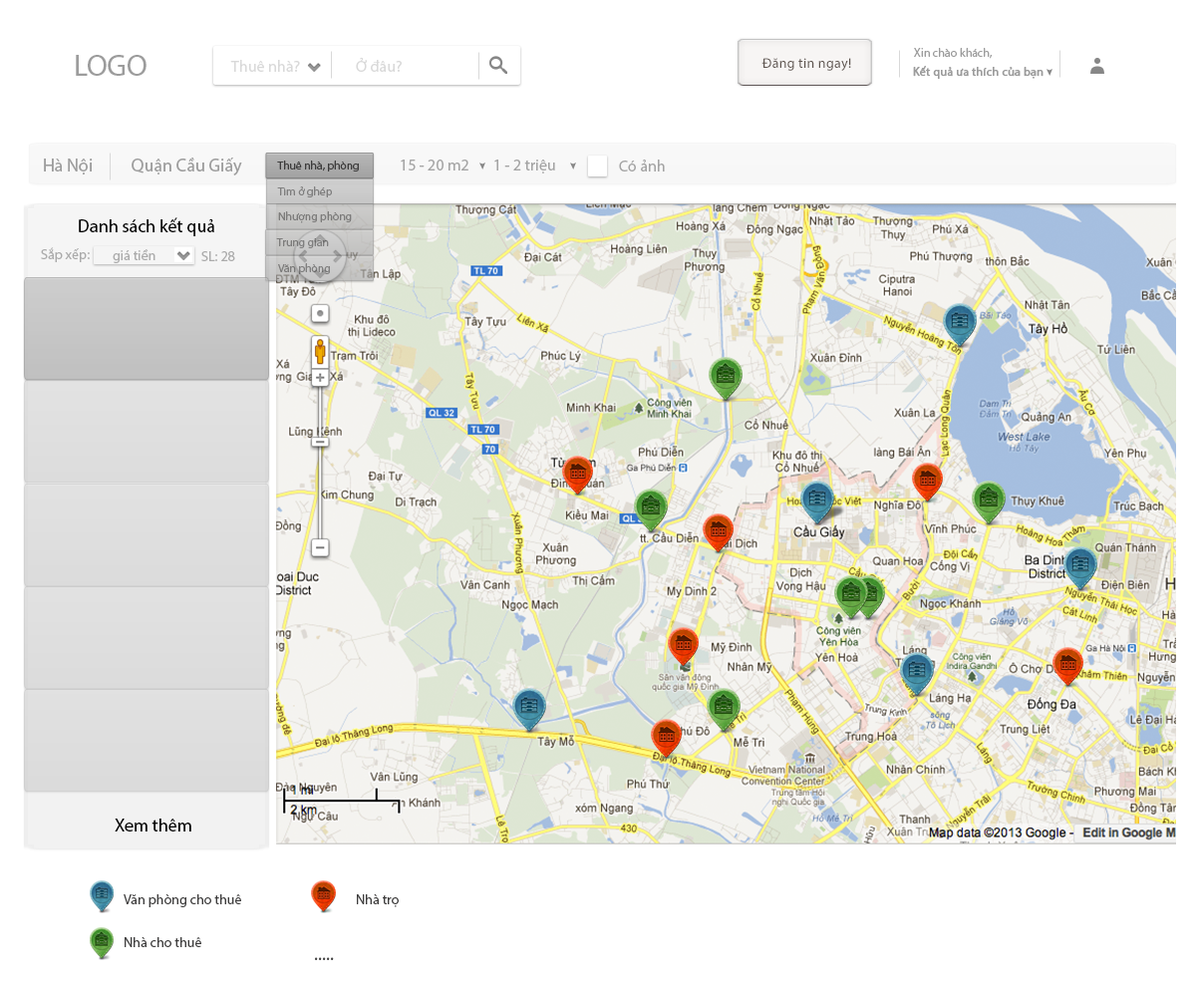
<style>
.page{position:relative;width:1196px;height:997px;background:#ffffff}
.page>*{position:absolute;margin:0}
.t1{font:12px "Tahoma";color:#9c9c9c}
.t2{font:29.9px "MyriadPro-Regular";color:#9c9c9c}
.t3{font:15.9px "MyriadPro-Regular";color:#c3c3c3}
.t4{font:14px "MyriadPro-Regular";letter-spacing:0.02em;color:#5d534d}
.t5{font:12px "MyriadPro-Regular";color:#9c9c9c;font-weight:bold}
.t6{font:17.9px "Tahoma";color:#9c9c9c}
.t7{font:11.5px "Tahoma";color:#3d3c3c}
.t8{font:15.9px "MyriadPro-Regular";color:#a4a4a4}
.t9{font:11.5px "Tahoma";color:#7f7f7f}
.t10{font:18.3px "MyriadPro-Regular";color:#030303}
.t11{font:11.5px "Tahoma";color:#7d7c7b}
.t12{font:11.5px "Tahoma";color:#7e7d7c}
.t13{font:14px "Tahoma";color:#ababab}
.t14{font:11.5px "Tahoma";color:#7e7e7e}
.t15{font:14px "Tahoma";color:#3d3c3c}
.t16{font:19.3px "Tahoma";color:#3d3c3c}
</style>
<div class="page">
<p class="t1" style="left:914px;top:48px;width:79px;height:11px">Xin chào khách,</p>
<p class="t2" style="left:76px;top:55px;width:71px;height:21px">LOGO</p>
<p class="t3" style="left:230px;top:60px;width:70px;height:12px;opacity:0.65">Thuê nhà?</p>
<p class="t3" style="left:356px;top:57px;width:46px;height:15px;opacity:0.65">Ở đâu?</p>
<p class="t4" style="left:762px;top:58px;width:89px;height:13px">Đăng tin ngay!</p>
<p class="t5" style="left:913px;top:66px;width:131px;height:14px">Kết quả ưa thích của bạn</p>
<p class="t6" style="left:44px;top:158px;width:49px;height:17px">Hà Nội</p>
<p class="t6" style="left:132px;top:158px;width:110px;height:17px">Quận Cầu Giấy</p>
<p class="t7" style="left:277px;top:160px;width:82px;height:11px">Thuê nhà, phòng</p>
<p class="t8" style="left:401px;top:159px;width:68px;height:11px">15 - 20 m2</p>
<p class="t8" style="left:494px;top:159px;width:61px;height:14px">1 - 2 triệu</p>
<p class="t8" style="left:619px;top:159px;width:46px;height:12px">Có ảnh</p>
<p class="t9" style="left:277px;top:186px;width:55px;height:11px">Tìm ở ghép</p>
<p class="t10" style="left:79px;top:217px;width:135px;height:19px">Danh sách kết quả</p>
<p class="t11" style="left:278px;top:211px;width:74px;height:12px">Nhượng phòng</p>
<p class="t12" style="left:276px;top:238px;width:53px;height:10px">Trung gian</p>
<p class="t13" style="left:41px;top:247px;width:49px;height:15px">Sắp xếp:</p>
<p class="t13" style="left:113px;top:249px;width:43px;height:14px">giá tiền</p>
<p class="t13" style="left:201px;top:251px;width:34px;height:10px">SL: 28</p>
<p class="t14" style="left:278px;top:263px;width:52px;height:11px">Văn phòng</p>
<p class="t10" style="left:115px;top:818px;width:76px;height:13px">Xem thêm</p>
<p class="t15" style="left:124px;top:894px;width:117px;height:13px">Văn phòng cho thuê</p>
<p class="t15" style="left:357px;top:894px;width:42px;height:13px">Nhà trọ</p>
<p class="t15" style="left:125px;top:937px;width:76px;height:10px">Nhà cho thuê</p>
<p class="t16" style="left:315px;top:957px;width:19px;height:3px">.....</p>
</div>
